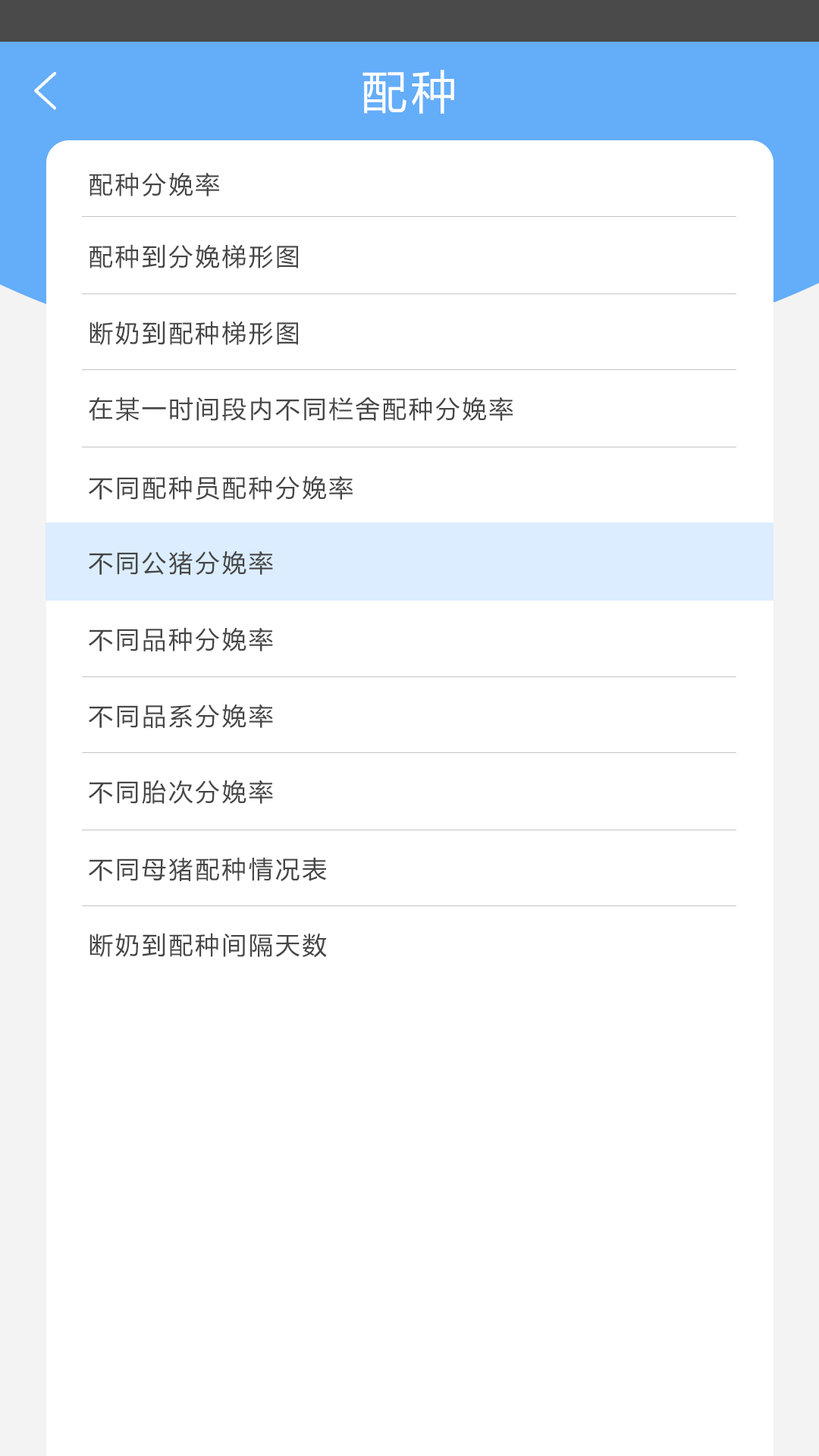
<style>
.page{position:relative;width:819px;height:1456px;background:#ffffff}
.page>*{position:absolute;margin:0}
.t1{font:45.5px "MicrosoftYaHei";letter-spacing:0.1em;color:#ffffff}
.t2{font:24.3px "MicrosoftYaHei";letter-spacing:0.1em;color:#464646}
</style>
<div class="page">
<p class="t1" style="left:362px;top:70px;width:92px;height:44px">配种</p>
<p class="t2" style="left:89px;top:172px;width:130px;height:24px">配种分娩率</p>
<p class="t2" style="left:89px;top:244px;width:209px;height:24px">配种到分娩梯形图</p>
<p class="t2" style="left:89px;top:321px;width:209px;height:24px">断奶到配种梯形图</p>
<p class="t2" style="left:89px;top:397px;width:424px;height:24px">在某一时间段内不同栏舍配种分娩率</p>
<p class="t2" style="left:89px;top:475px;width:264px;height:25px">不同配种员配种分娩率</p>
<p class="t2" style="left:89px;top:551px;width:184px;height:24px">不同公猪分娩率</p>
<p class="t2" style="left:89px;top:627px;width:184px;height:24px">不同品种分娩率</p>
<p class="t2" style="left:89px;top:704px;width:184px;height:24px">不同品系分娩率</p>
<p class="t2" style="left:89px;top:780px;width:184px;height:24px">不同胎次分娩率</p>
<p class="t2" style="left:89px;top:857px;width:238px;height:24px">不同母猪配种情况表</p>
<p class="t2" style="left:89px;top:933px;width:238px;height:25px">断奶到配种间隔天数</p>
</div>
